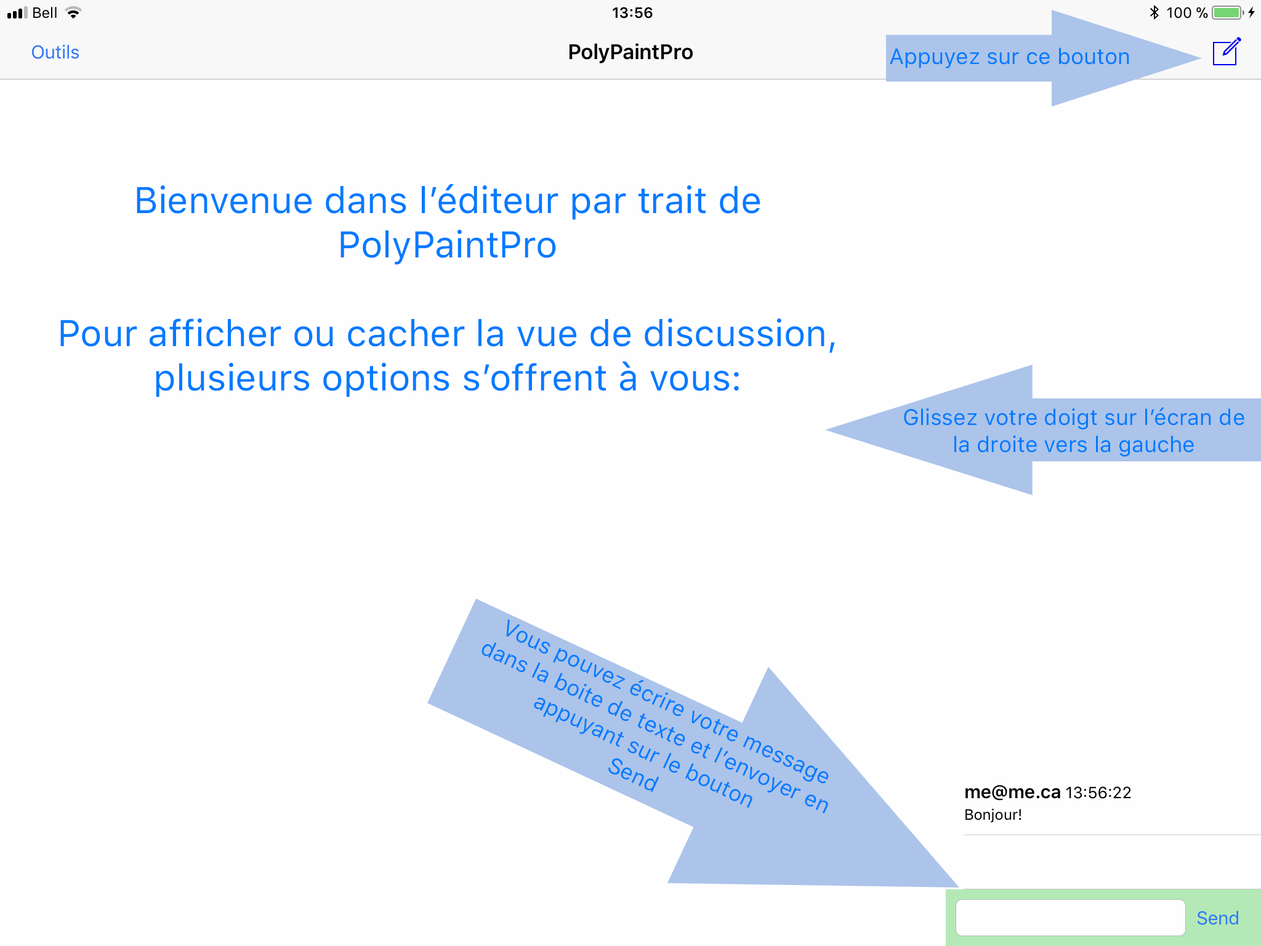
<style>
.page{position:relative;width:1261px;height:946px;background:#fffeff}
.page>*{position:absolute;margin:0}
.t1{font:22.2px "SFProText-Regular";color:#007aff}
.t2{font:36.9px "SFProText-Regular";color:#007aff}
</style>
<div class="page">
<p class="t1" style="left:890px;top:47px;width:239px;height:21px">Appuyez sur ce bouton</p>
<p class="t2" style="left:60px;top:184px;width:775px;height:213px;text-align:center">Bienvenue dans l’éditeur par trait de PolyPaintPro<br><br>Pour afficher ou cacher la vue de discussion, <br>plusieurs options s’offrent à vous:</p>
<p class="t1" style="left:904px;top:407px;width:340px;height:50px;text-align:center">Glissez votre doigt sur l’écran de <br>la droite vers la gauche</p>
<p class="t1" style="left:481px;top:619px;width:348px;height:194px;text-align:center;rotate:25deg">Vous pouvez écrire votre message dans la boite de texte et l’envoyer en appuyant sur le bouton <br>Send</p>
</div>
